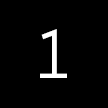
<style>
.page{position:relative;width:108px;height:108px;background:#000000}
.page>*{position:absolute;margin:0}
.t1{font:72px "OratorStd";color:#ffffff}
</style>
<div class="page">
<p class="t1" style="left:40px;top:29px;width:27px;height:49px">1</p>
</div>
